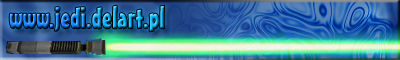
<style>
.page{position:relative;width:400px;height:60px}
.page>*{position:absolute;margin:0}
.t1{font:30px "MisterEarlBT-Regular"}
</style>
<div class="page">
<p class="t1" style="left:9px;top:5px;width:156px;height:27px">www.jedi.delart.pl</p>
</div>
